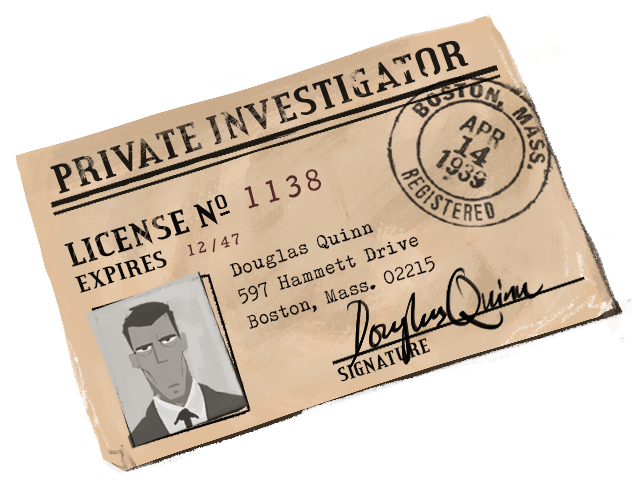
<style>
.page{position:relative;width:632px;height:487px;background:#ffffff}
.page>*{position:absolute;margin:0}
.t1{font:30.7px "F25Executive";letter-spacing:0.15em;color:#562828}
.t2{font:15.6px "F25Executive";letter-spacing:0.21em;color:#562828}
.t3{font:18.7px/27.2px "HOLLYWOOD-STARFIRE";color:#0a0907}
.t4{font:25px "CreditValley-Bold";letter-spacing:0.01em;color:#0a0907;scale:1.09 1}
.t5{font:21px "CreditValley-Bold";letter-spacing:0.01em;color:#0a0907}
</style>
<div class="page">
<p class="t1" style="left:244px;top:169px;width:77px;height:40px;rotate:-15deg">1138</p>
<p class="t2" style="left:187px;top:233px;width:52px;height:23px;rotate:-13deg">12/47</p>
<p class="t3" style="left:229px;top:224px;width:206px;height:105px;rotate:-18deg">Douglas Quinn<br>597 Hammett Drive<br>Boston, Mass. 02215</p>
<p class="t4" style="left:75px;top:250px;width:92px;height:43px;rotate:-17deg">EXPIRES</p>
<p class="t5" style="left:337px;top:338px;width:94px;height:44px;rotate:-19deg">SIGNATURE</p>
</div>
